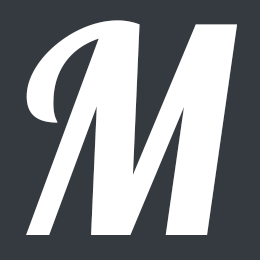
<style>
.page{position:relative;width:260px;height:260px;background:#343a40}
.page>*{position:absolute;margin:0}
.t1{font:286.1px "Galada-Regular";color:#ffffff}
</style>
<div class="page">
<p class="t1" style="left:26px;top:20px;width:212px;height:215px">M</p>
</div>
